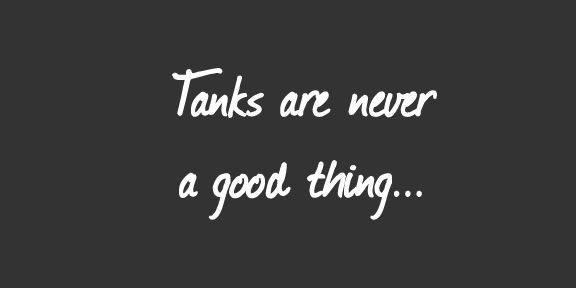
<style>
.page{position:relative;width:576px;height:288px;background:#333333}
.page>*{position:absolute;margin:0}
.t1{font:67.6px "Journal";color:#fefefe;font-weight:bold}
</style>
<div class="page">
<p class="t1" style="left:172px;top:68px;width:265px;height:152px;text-align:center">Tanks are never<br>a good thing...</p>
</div>
